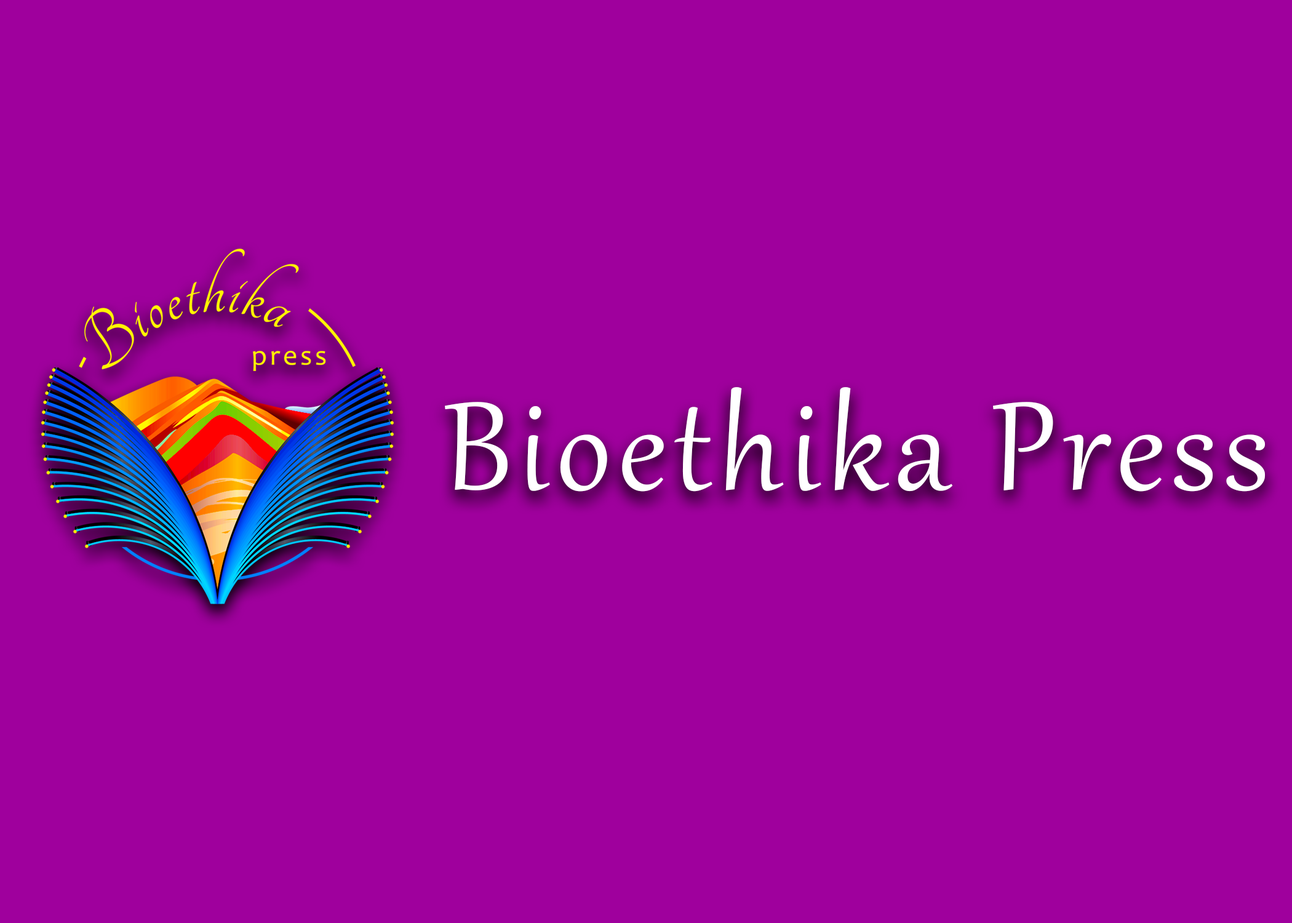
<style>
.page{position:relative;width:1292px;height:923px;background:#9f009d}
.page>*{position:absolute;margin:0}
.t1{font:153.8px "Gabriola";letter-spacing:0.05em;color:#ffffff}
</style>
<div class="page">
<p class="t1" style="left:445px;top:387px;width:821px;height:105px">Bioethika Press</p>
</div>
